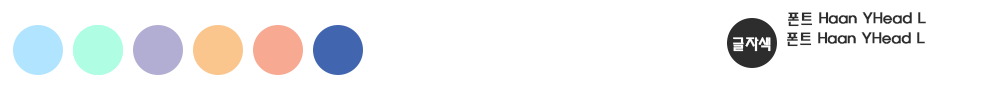
<style>
.page{position:relative;width:1000px;height:100px;background:#ffffff}
.page>*{position:absolute;margin:0}
.t1{font:15px "HaanYHeadL";color:#2d2d2d;font-weight:bold}
.t2{font:15px "HaanYHeadL";color:#ffffff;font-weight:bold}
</style>
<div class="page">
<p class="t1" style="left:788px;top:12px;width:138px;height:15px">폰트 Haan YHead L</p>
<p class="t2" style="left:733px;top:37px;width:38px;height:15px">글자색</p>
<p class="t1" style="left:787px;top:32px;width:138px;height:15px">폰트 Haan YHead L</p>
</div>
